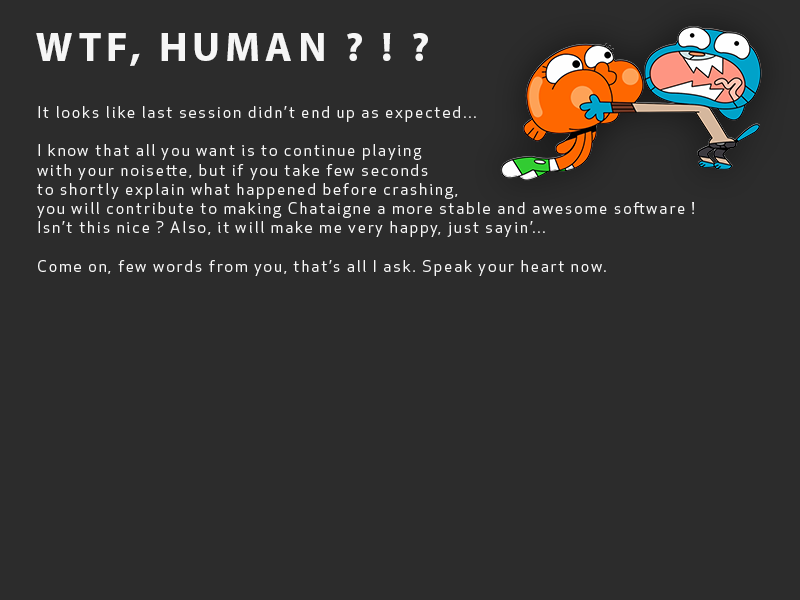
<style>
.page{position:relative;width:800px;height:600px;background:#2c2c2c}
.page>*{position:absolute;margin:0}
.t1{font:41.5px "MyriadPro-Bold";letter-spacing:0.12em;color:#f6f6f6}
.t2{font:16px "ApexNew-Book";letter-spacing:0.12em;color:#f6f6f6}
</style>
<div class="page">
<p class="t1" style="left:36px;top:33px;width:392px;height:33px">WTF, HUMAN ? ! ?</p>
<p class="t2" style="left:37px;top:106px;width:657px;height:170px">It looks like last session didn’t end up as expected...<br> <br>I know that all you want is to continue playing<br>with your noisette, but if you take few seconds<br>to shortly explain what happened before crashing,<br>you will contribute to making Chataigne a more stable and awesome software ! <br>Isn’t this nice ? Also, it will make me very happy, just sayin’...<br><br>Come on, few words from you, that’s all I ask. Speak your heart now.</p>
</div>
